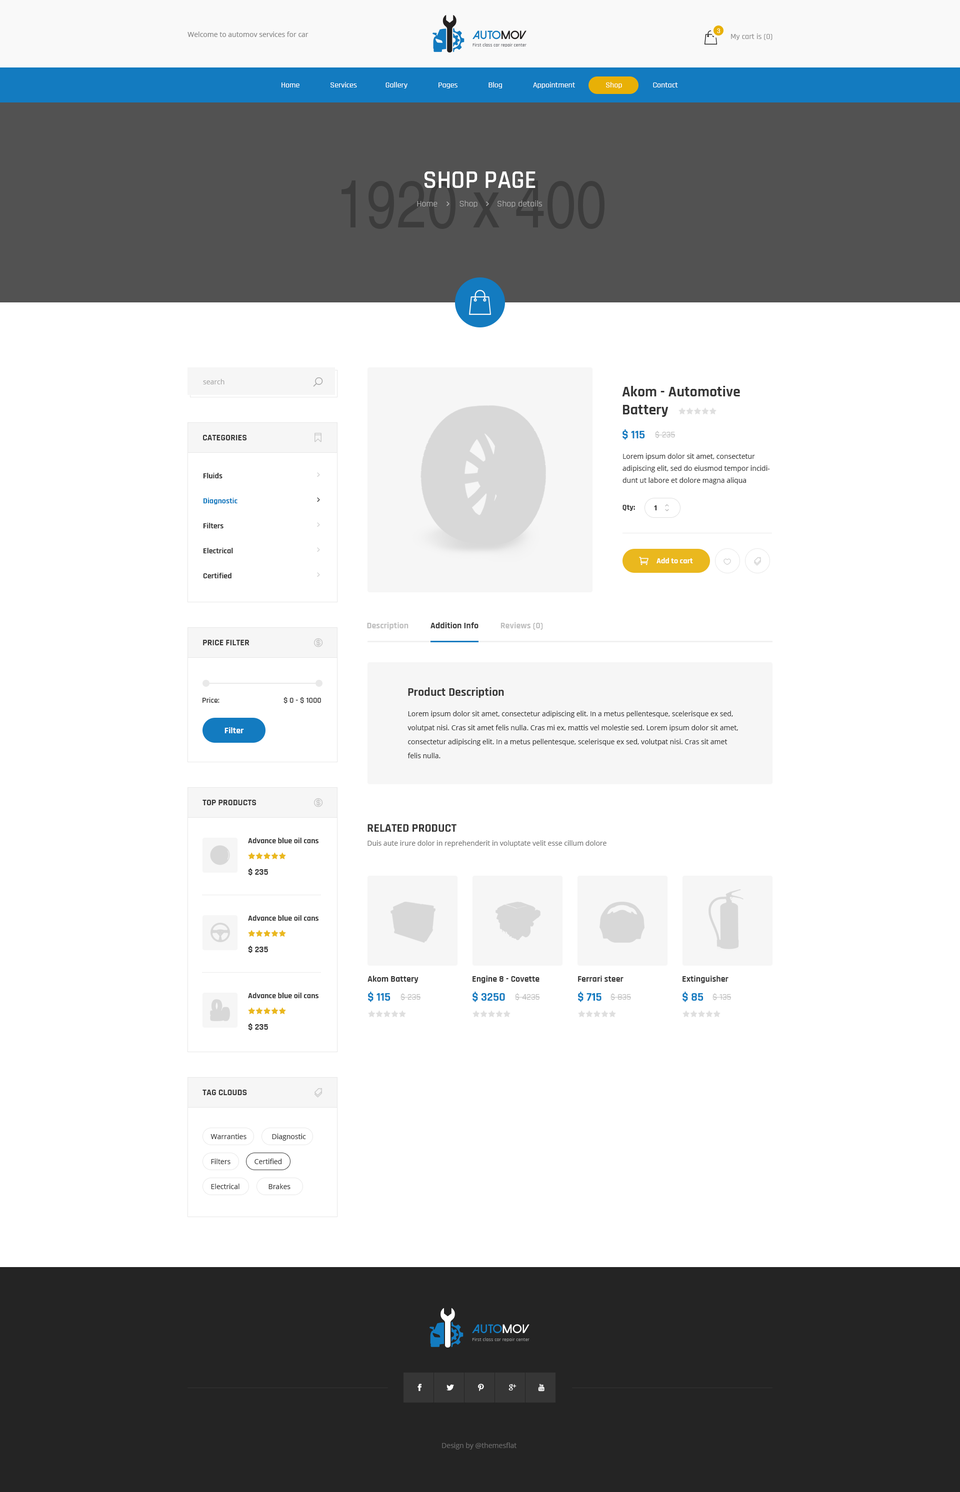
<style>
.page{position:relative;width:960px;height:1492px;background:#ffffff}
.page>*{position:absolute;margin:0}
.t1{font:6px "Poppins-Regular";color:#ffffff}
.t2{font:7px "OpenSans";color:#838383}
.t3{font:8px "Rajdhani-Medium";color:#8f8f8f}
.t4{font:8px "Rajdhani-Medium";color:#ffffff}
.t5{font:25px "Rajdhani-SemiBold";color:#ffffff;text-transform:uppercase}
.t6{font:9px "Rajdhani-Regular";color:#b5b5b5}
.t7{font:7px "OpenSans";color:#a7a7a7}
.t8{font:15px/18px "Rajdhani-Bold";color:#363636}
.t9{font:9px "Rajdhani-Bold";color:#363636;text-transform:uppercase}
.t10{font:12px "Rajdhani-Bold";color:#137bc0}
.t11{font:9px "Rajdhani-Regular";color:#b2b2b2}
.t12{font:7px/12px "OpenSans";color:#363636}
.t13{font:8px/25px "Rajdhani-Bold";color:#343434}
.t14{font:8px/25px "Rajdhani-Bold";color:#137bc0}
.t15{font:8px "Rajdhani-Bold";color:#363636}
.t16{font:7px "OpenSans-Bold";color:#363636}
.t17{font:8px "Rajdhani-Bold";color:#ffffff}
.t18{font:9px "Rajdhani-Bold";color:#363636}
.t19{font:9px "Rajdhani-Bold";color:#bdbdbd}
.t20{font:12px "Rajdhani-Bold";color:#363636}
.t21{font:8px "Rajdhani-SemiBold";color:#363636}
.t22{font:7px/14px "OpenSans";color:#363636}
.t23{font:9px "Rajdhani-Bold";color:#ffffff}
.t24{font:12px "Rajdhani-Bold";color:#363636;text-transform:uppercase}
.t25{font:8px "Rajdhani-Bold";color:#343434}
.t26{font:7px "OpenSans";color:#737373}
.t27{font:7px "OpenSans";color:#343434}
.t28{font:7px "OpenSans";color:#6a6a6a}
</style>
<div class="page">
<p class="t1" style="left:717px;top:28px;width:3px;height:5px">3</p>
<p class="t2" style="left:188px;top:32px;width:120px;height:5px">Welcome to automov services for car</p>
<p class="t3" style="left:731px;top:34px;width:41px;height:6px">My cart is (0)</p>
<p class="t4" style="left:282px;top:82px;width:396px;height:6px">Home               Services              Gallery               Pages               Blog               Appointment               Shop               Contact</p>
<p class="t5" style="left:424px;top:172px;width:112px;height:16px">Shop page</p>
<p class="t6" style="left:417px;top:200px;width:125px;height:8px">Home         Shop        Shop details</p>
<p class="t7" style="left:203px;top:379px;width:21px;height:5px">search</p>
<p class="t8" style="left:622px;top:386px;width:118px;height:31px">Akom - Automotive <br>Battery</p>
<p class="t9" style="left:203px;top:435px;width:44px;height:5px">Categories</p>
<p class="t10" style="left:622px;top:430px;width:23px;height:10px">$ 115</p>
<p class="t11" style="left:655px;top:431px;width:21px;height:7px">$ 235</p>
<p class="t12" style="left:622px;top:454px;width:148px;height:30px">Lorem ipsum dolor sit amet, consectetur adipiscing elit, sed do eiusmod tempor incididunt ut labore et dolore magna aliqua</p>
<p class="t13" style="left:203px;top:473px;width:35px;height:105px">Fluids<br><span class="t14">Diagnostic<br></span>Filters<br>Electrical<br>Certified</p>
<p class="t15" style="left:622px;top:505px;width:13px;height:6px">Qty:</p>
<p class="t16" style="left:654px;top:506px;width:3px;height:4px">1</p>
<p class="t17" style="left:656px;top:558px;width:37px;height:6px">Add to cart</p>
<p class="t18" style="left:367px;top:622px;width:176px;height:8px"><span class="t19">Description          </span> Addition Info  <span class="t19">         Reviews (0)</span></p>
<p class="t9" style="left:203px;top:640px;width:47px;height:6px">price filter</p>
<p class="t20" style="left:408px;top:688px;width:96px;height:10px">Product Description</p>
<p class="t21" style="left:202px;top:697px;width:119px;height:7px">Price:         $ 0 - $ 1000</p>
<p class="t22" style="left:408px;top:711px;width:330px;height:47px">Lorem ipsum dolor sit amet, consectetur adipiscing elit. In a metus pellentesque, scelerisque ex sed, volutpat nisi. Cras sit amet felis nulla. Cras mi ex, mattis vel molestie sed. Lorem ipsum dolor sit amet, consectetur adipiscing elit. In a metus pellentesque, scelerisque ex sed, volutpat nisi. Cras sit amet felis nulla.</p>
<p class="t23" style="left:224px;top:728px;width:20px;height:6px">Filter</p>
<p class="t9" style="left:202px;top:800px;width:54px;height:6px">top products</p>
<p class="t24" style="left:368px;top:824px;width:88px;height:8px">related product</p>
<p class="t25" style="left:248px;top:838px;width:70px;height:6px">Advance blue oil cans</p>
<p class="t26" style="left:368px;top:840px;width:238px;height:8px">Duis aute irure dolor in reprehenderit in voluptate velit esse cillum dolore</p>
<p class="t18" style="left:248px;top:868px;width:20px;height:8px">$ 235</p>
<p class="t25" style="left:248px;top:916px;width:70px;height:5px">Advance blue oil cans</p>
<p class="t18" style="left:248px;top:946px;width:20px;height:8px">$ 235</p>
<p class="t18" style="left:368px;top:976px;width:50px;height:8px">Akom Battery</p>
<p class="t18" style="left:472px;top:976px;width:68px;height:8px">Engine 8 - Covette</p>
<p class="t18" style="left:578px;top:976px;width:46px;height:6px">Ferrari steer</p>
<p class="t18" style="left:682px;top:976px;width:46px;height:8px">Extinguisher</p>
<p class="t25" style="left:248px;top:993px;width:70px;height:5px">Advance blue oil cans</p>
<p class="t10" style="left:368px;top:992px;width:22px;height:10px">$ 115</p>
<p class="t11" style="left:400px;top:994px;width:21px;height:7px">$ 235</p>
<p class="t10" style="left:472px;top:992px;width:33px;height:10px">$ 3250</p>
<p class="t11" style="left:515px;top:994px;width:25px;height:7px">$ 4235</p>
<p class="t10" style="left:578px;top:992px;width:24px;height:10px">$ 715</p>
<p class="t11" style="left:610px;top:994px;width:21px;height:7px">$ 835</p>
<p class="t10" style="left:682px;top:992px;width:22px;height:10px">$ 85</p>
<p class="t11" style="left:712px;top:994px;width:20px;height:7px">$ 135</p>
<p class="t18" style="left:248px;top:1024px;width:20px;height:7px">$ 235</p>
<p class="t9" style="left:202px;top:1090px;width:45px;height:6px">Tag clouds</p>
<p class="t27" style="left:210px;top:1134px;width:36px;height:6px">Warranties</p>
<p class="t27" style="left:272px;top:1134px;width:34px;height:7px">Diagnostic</p>
<p class="t27" style="left:211px;top:1159px;width:19px;height:5px">Filters</p>
<p class="t27" style="left:254px;top:1159px;width:28px;height:5px">Certified</p>
<p class="t27" style="left:211px;top:1184px;width:29px;height:6px">Electrical</p>
<p class="t27" style="left:268px;top:1184px;width:22px;height:6px">Brakes</p>
<p class="t28" style="left:442px;top:1443px;width:74px;height:7px">Design by @themesflat</p>
</div>
